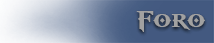
<style>
.page{position:relative;width:214px;height:43px}
.page>*{position:absolute;margin:0}
.t1{font:26px "GodOfWar";color:#a1a1a1}
</style>
<div class="page">
<p class="t1" style="left:136px;top:11px;width:69px;height:21px">Foro</p>
</div>
